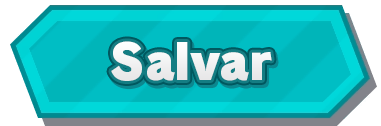
<style>
.page{position:relative;width:381px;height:126px}
.page>*{position:absolute;margin:0}
.t1{font:48.1px "RodinPro-UB";letter-spacing:-0.005em;color:#eff0f0}
</style>
<div class="page">
<p class="t1" style="left:111px;top:41px;width:161px;height:40px">Salvar</p>
</div>
